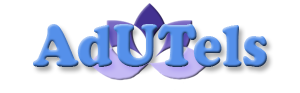
<style>
.page{position:relative;width:300px;height:93px;background:#ffffff}
.page>*{position:absolute;margin:0}
.t1{font:61px "CooperBlack";color:#5590ea;scale:0.9 1}
</style>
<div class="page">
<p class="t1" style="left:33px;top:24px;width:234px;height:43px">AdUTels</p>
</div>
